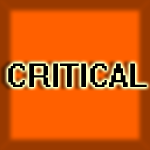
<style>
.page{position:relative;width:150px;height:150px;background:#ff6000}
.page>*{position:absolute;margin:0}
.t1{font:30px "System";color:#010101}
</style>
<div class="page">
<p class="t1" style="left:8px;top:63px;width:139px;height:24px">CRITICAL</p>
</div>
